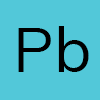
<style>
.page{position:relative;width:100px;height:100px;background:#52c8d9}
.page>*{position:absolute;margin:0}
.t1{font:62.5px "Muli-Regular";color:#000000}
</style>
<div class="page">
<p class="t1" style="left:18px;top:26px;width:71px;height:46px">Pb</p>
</div>
